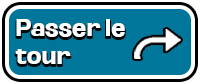
<style>
.page{position:relative;width:200px;height:84px;background:#00769a}
.page>*{position:absolute;margin:0}
.t1{font:23px "Oddlini-ExtraBold";color:#ffffff}
</style>
<div class="page">
<p class="t1" style="left:15px;top:19px;width:110px;height:45px">Passer le tour</p>
</div>
